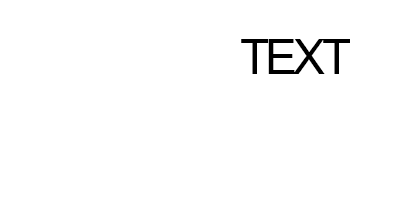
<style>
.page{position:relative;width:400px;height:200px;background:#ffffff}
.page>*{position:absolute;margin:0}
.t1{font:48px "ArialMT";letter-spacing:-0.08em;color:#000000}
</style>
<div class="page">
<p class="t1" style="left:241px;top:39px;width:109px;height:35px">TEXT</p>
</div>
